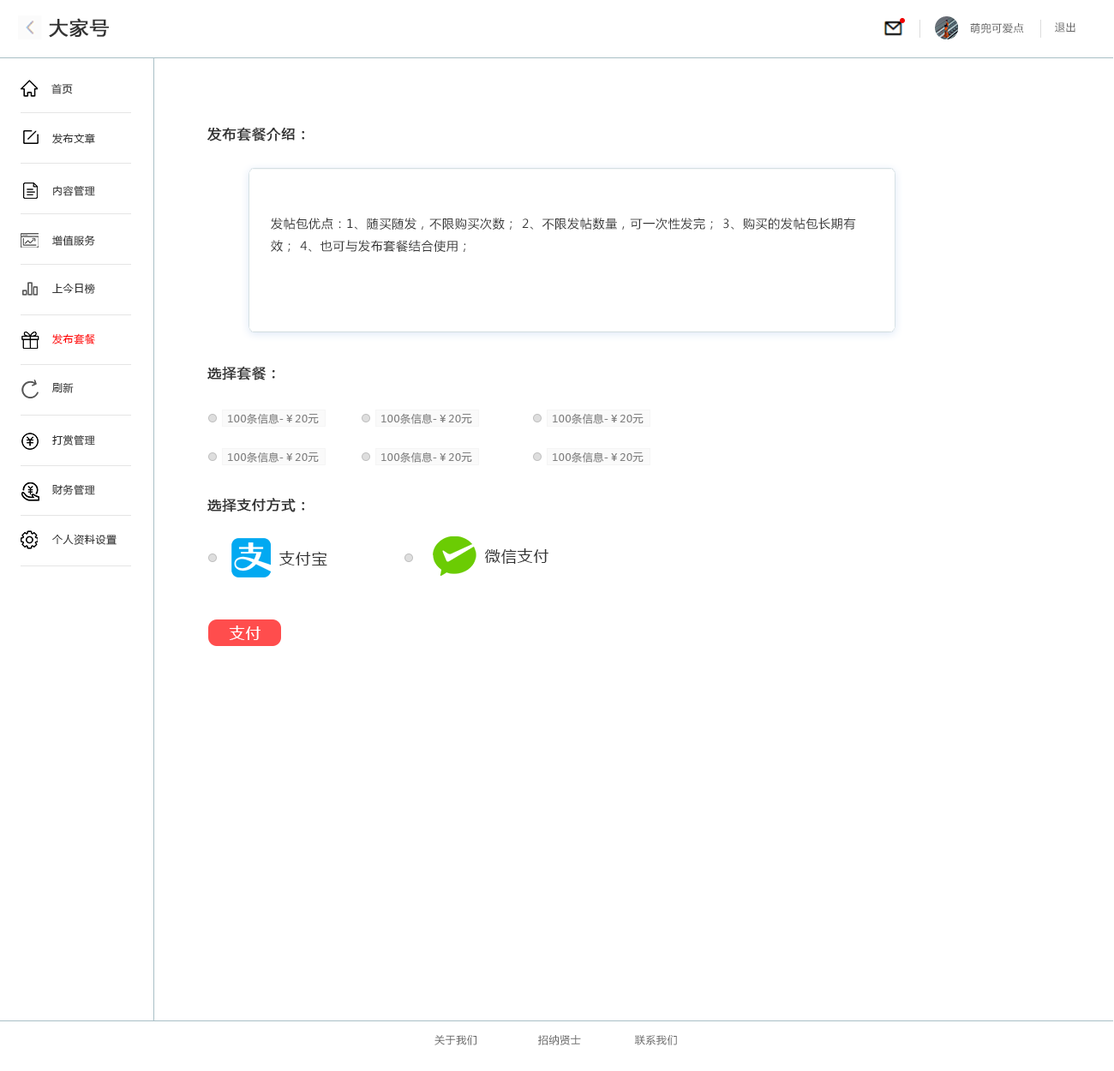
<style>
.page{position:relative;width:1114px;height:1071px;background:#ffffff}
.page>*{position:absolute;margin:0}
.t1{font:18.8px "MicrosoftYaHei";letter-spacing:0.05em;color:#333333;font-weight:bold}
.t2{font:10.3px "MicrosoftYaHei";letter-spacing:0.05em;color:#666666}
.t3{font:10.3px "MicrosoftYaHei";letter-spacing:0.05em;color:#333333}
.t4{font:13.7px "MicrosoftYaHei";letter-spacing:0.05em;color:#333333;font-weight:bold}
.t5{font:12px/5.1px "MicrosoftYaHei";letter-spacing:0.05em;color:#333333}
.t6{font:10.3px "MicrosoftYaHei";letter-spacing:0.05em;color:#ff0000}
.t7{font:10.3px "MicrosoftYaHei";letter-spacing:0.05em;color:#808080}
.t8{font:15.4px "MicrosoftYaHei";letter-spacing:0.05em;color:#333333}
.t9{font:15.4px "MicrosoftYaHei";letter-spacing:0.05em;color:#ffffff}
</style>
<div class="page">
<p class="t1" style="left:49px;top:18px;width:60px;height:20px">大家号</p>
<p class="t2" style="left:970px;top:23px;width:54px;height:10px">萌兜可爱点</p>
<p class="t2" style="left:1055px;top:22px;width:20px;height:11px">退出</p>
<p class="t3" style="left:51px;top:83px;width:22px;height:11px">首页</p>
<p class="t3" style="left:52px;top:133px;width:43px;height:11px">发布文章</p>
<p class="t4" style="left:207px;top:127px;width:98px;height:14px">发布套餐介绍：</p>
<p class="t3" style="left:53px;top:185px;width:42px;height:11px">内容管理</p>
<p class="t5" style="left:271px;top:218px;width:585px;height:34px">发帖包优点：1、随买随发，不限购买次数； 2、不限发帖数量，可一次性发完； 3、购买的发帖包长期有<br>效； 4、也可与发布套餐结合使用；</p>
<p class="t3" style="left:52px;top:235px;width:43px;height:11px">增值服务</p>
<p class="t3" style="left:52px;top:283px;width:43px;height:11px">上今日榜</p>
<p class="t6" style="left:52px;top:333px;width:43px;height:11px">发布套餐</p>
<p class="t4" style="left:207px;top:366px;width:68px;height:14px">选择套餐：</p>
<p class="t3" style="left:52px;top:383px;width:22px;height:10px">刷新</p>
<p class="t7" style="left:228px;top:413px;width:91px;height:11px">100条信息-￥20元</p>
<p class="t7" style="left:381px;top:413px;width:91px;height:11px">100条信息-￥20元</p>
<p class="t7" style="left:553px;top:413px;width:90px;height:11px">100条信息-￥20元</p>
<p class="t3" style="left:52px;top:434px;width:43px;height:11px">打赏管理</p>
<p class="t7" style="left:228px;top:451px;width:91px;height:12px">100条信息-￥20元</p>
<p class="t7" style="left:381px;top:451px;width:91px;height:12px">100条信息-￥20元</p>
<p class="t7" style="left:553px;top:451px;width:90px;height:12px">100条信息-￥20元</p>
<p class="t3" style="left:52px;top:484px;width:43px;height:11px">财务管理</p>
<p class="t4" style="left:207px;top:498px;width:98px;height:14px">选择支付方式：</p>
<p class="t3" style="left:52px;top:534px;width:65px;height:11px">个人资料设置</p>
<p class="t8" style="left:279px;top:551px;width:48px;height:14px">支付宝</p>
<p class="t8" style="left:485px;top:548px;width:63px;height:16px">微信支付</p>
<p class="t9" style="left:229px;top:625px;width:31px;height:15px">支付</p>
<p class="t2" style="left:434px;top:1035px;width:243px;height:10px">关于我们                 招纳贤士               联系我们</p>
</div>
